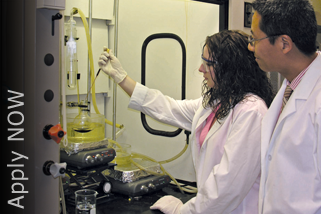
<style>
.page{position:relative;width:321px;height:214px}
.page>*{position:absolute;margin:0}
.t1{font:22px "Tahoma";letter-spacing:0.05em;color:#bab9b9}
</style>
<div class="page">
<p class="t1" style="left:7px;top:89px;width:22px;height:120px;rotate:-90deg">Apply NOW</p>
</div>
